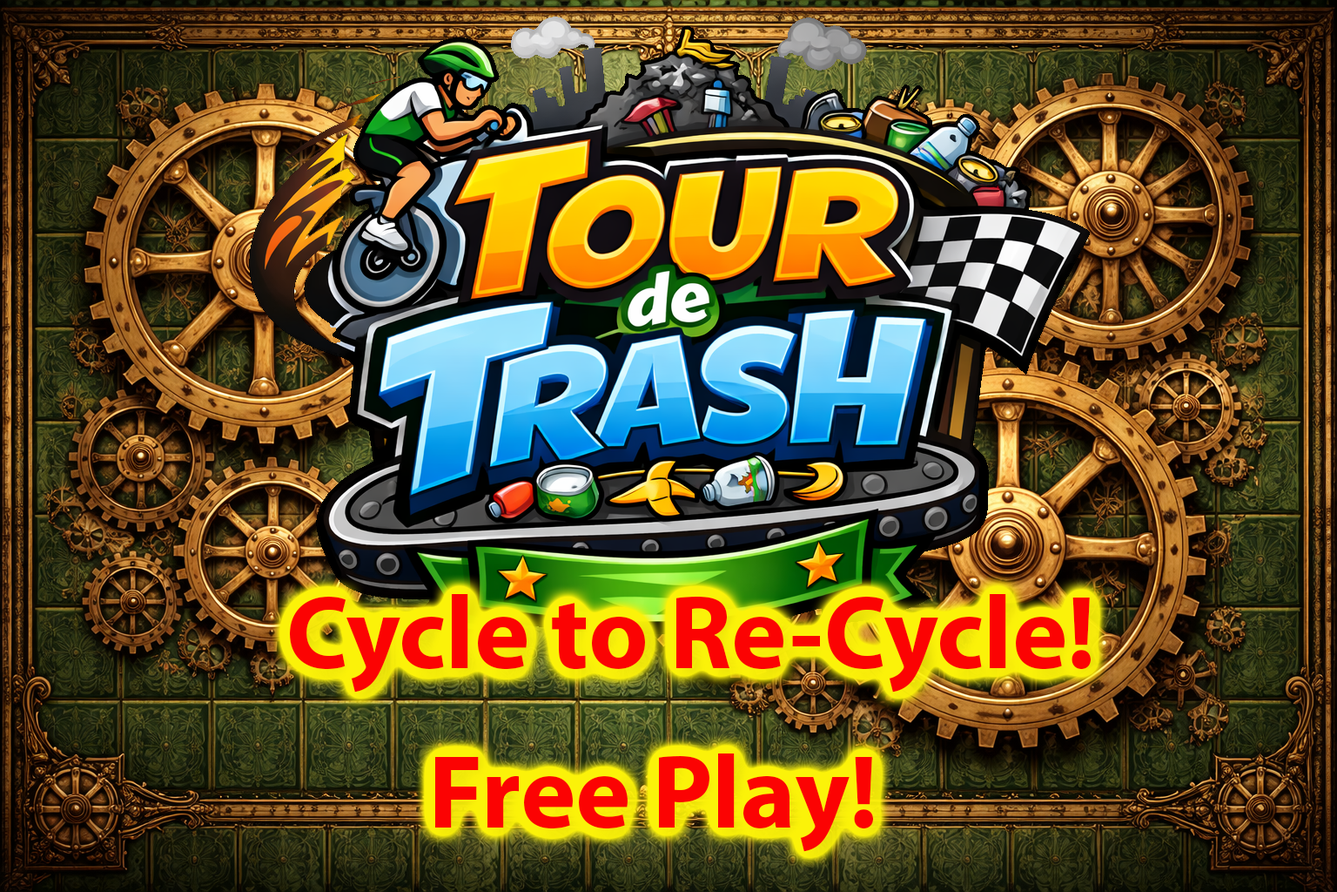
<style>
.page{position:relative;width:1337px;height:892px}
.page>*{position:absolute;margin:0}
.t1{font:104.5px "MyriadPro-Bold";color:#fb0303}
</style>
<div class="page">
<p class="t1" style="left:290px;top:594px;width:801px;height:98px">Cycle to Re-Cycle!</p>
<p class="t1" style="left:435px;top:753px;width:438px;height:99px">Free Play!</p>
</div>
